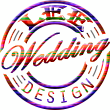
<style>
.page{position:relative;width:110px;height:110px;background:#fefffe}
.page>*{position:absolute;margin:0}
.t1{font:21.8px "Algerian";letter-spacing:0.004em;scale:1.08 1}
.t2{font:42px "VNIA5BoldOblique";letter-spacing:0.004em;font-weight:bold;scale:1.06 1}
.t3{font:16.9px "OratorStd";letter-spacing:0.004em;scale:0.95 1}
</style>
<div class="page">
<p class="t1" style="left:17px;top:5px;width:76px;height:27px;rotate:1deg">Lee</p>
<p class="t2" style="left:1px;top:32px;width:109px;height:41px;rotate:-13deg">Wedding</p>
<p class="t3" style="left:21px;top:78px;width:74px;height:25px;rotate:-2deg">DESIGN</p>
</div>
